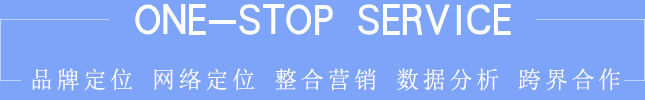
<style>
.page{position:relative;width:645px;height:100px;background:#7da4f8}
.page>*{position:absolute;margin:0}
.t1{font:23.7px "SimSun";letter-spacing:0.16em;color:#fbfafa;scale:0.97 1}
</style>
<div class="page">
<p class="t1" style="left:32px;top:68px;width:588px;height:23px">品牌定位 网络定位 整合营销 数据分析 跨界合作</p>
</div>
